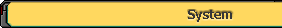
<style>
.page{position:relative;width:282px;height:28px;background:#ffd85f}
.page>*{position:absolute;margin:0}
.t1{font:12px "MeiryoUI-Bold";color:#363636}
</style>
<div class="page">
<p class="t1" style="left:188px;top:10px;width:44px;height:12px">System</p>
</div>
